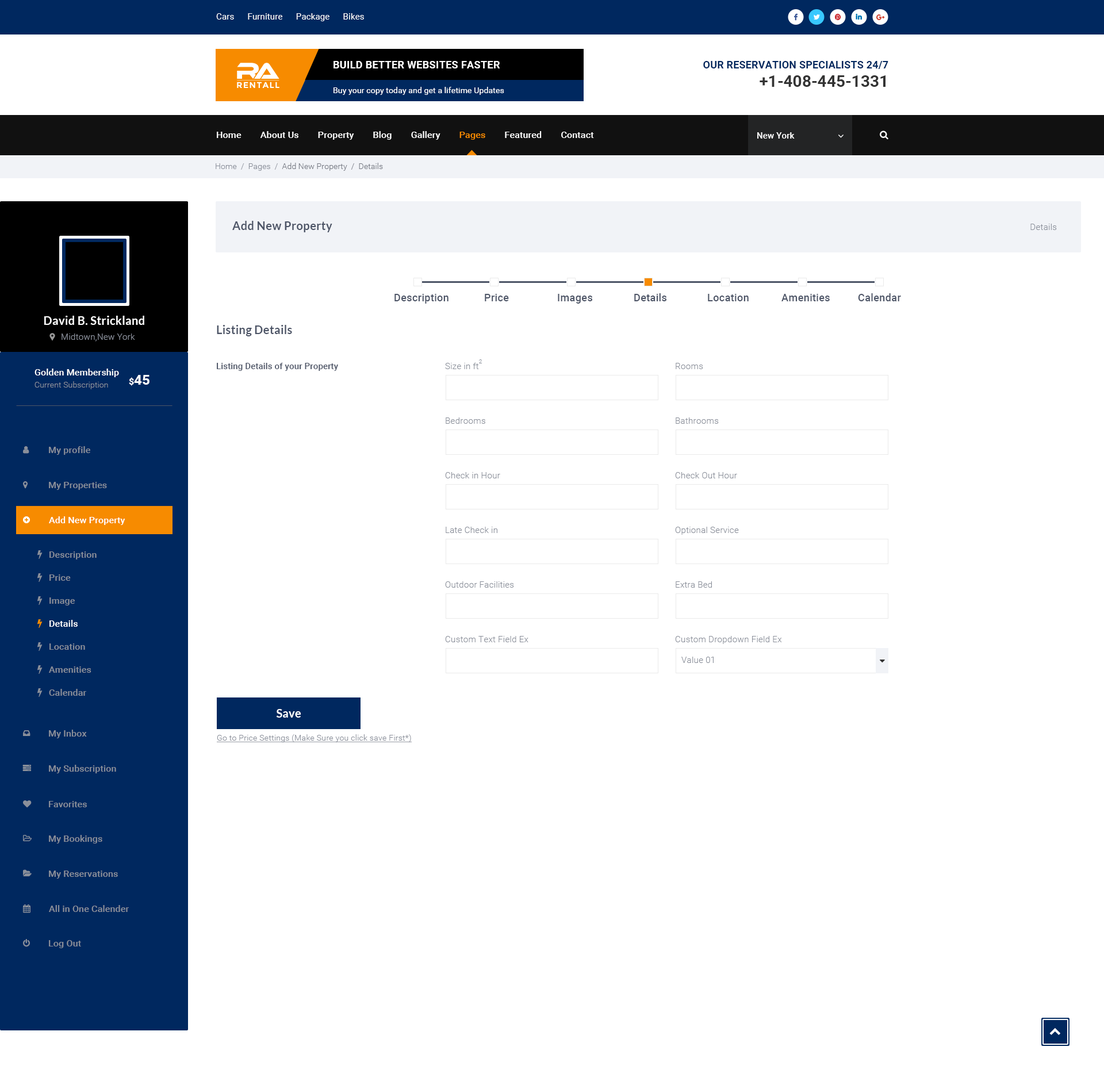
<style>
.page{position:relative;width:1104px;height:1081px;background:#ffffff}
.page>*{position:absolute;margin:0}
.t1{font:8.6px "Roboto-Regular";letter-spacing:0.01em;color:#ffffff}
.t2{font:10.3px "Roboto-Bold";letter-spacing:0.02em;color:#ffffff;text-transform:uppercase}
.t3{font:10.3px "Roboto-Bold";letter-spacing:0.01em;color:#00285f;text-transform:uppercase}
.t4{font:16.1px "Roboto-Bold";color:#333333}
.t5{font:8.4px "Montserrat-Bold";letter-spacing:0.08em;color:#ffffff;text-transform:uppercase}
.t6{font:8px "Roboto-Regular";letter-spacing:0.01em;color:#ffffff}
.t7{font:9.2px "Roboto-Medium";letter-spacing:0.01em;color:#ffffff}
.t8{font:9.2px "Roboto-Medium";letter-spacing:0.01em;color:#f78b00}
.t9{font:8.6px "Roboto-Medium";letter-spacing:0.01em;color:#ffffff}
.t10{font:8px "Roboto-Light";letter-spacing:0.01em;color:#757983}
.t11{font:8px "Roboto-Light";letter-spacing:0.01em;color:#8a8f9a}
.t12{font:11.5px "Lato-Bold";letter-spacing:0.01em;color:#4d5567}
.t13{font:8.6px "Roboto-Light";letter-spacing:0.01em;color:#8a8f9a}
.t14{font:10.3px "Roboto-Medium";letter-spacing:0.01em;color:#4d5567}
.t15{font:11.5px "Lato-Bold";letter-spacing:0.01em;color:#ffffff}
.t16{font:8.6px "Roboto-Medium";letter-spacing:0.01em;color:#4d5567}
.t17{font:5.7px "Roboto-Light";letter-spacing:0.01em;color:#8a8f9a}
.t18{font:13.8px "Roboto-Bold";letter-spacing:0.01em;color:#ffffff}
.t19{font:9.2px "Roboto-Bold";letter-spacing:0.01em;color:#ffffff}
.t20{font:9.2px "Roboto-Medium";letter-spacing:0.01em;color:#8a8f9a}
.t21{font:9.2px/23px "Roboto-Medium";letter-spacing:0.01em;color:#8a8f9a}
.t22{font:9.2px/23px "Roboto-Medium";letter-spacing:0.01em;color:#ffffff}
.t23{font:8px "Roboto-Light";letter-spacing:0.01em;color:#8a8f9a;text-decoration:underline}
</style>
<div class="page">
<p class="t1" style="left:216px;top:13px;width:148px;height:8px">Cars      Furniture      Package      Bikes</p>
<p class="t2" style="left:333px;top:61px;width:167px;height:7px">Build better Websites Faster</p>
<p class="t3" style="left:703px;top:61px;width:185px;height:8px">Our Reservation Specialists 24/7</p>
<p class="t4" style="left:759px;top:75px;width:126px;height:12px">+1-408-445-1331</p>
<p class="t5" style="left:237px;top:82px;width:42px;height:6px">RentAll</p>
<p class="t6" style="left:333px;top:87px;width:171px;height:8px">Buy your copy today and get a lifetime Updates</p>
<p class="t7" style="left:217px;top:131px;width:377px;height:9px">Home        About Us        Property        Blog        Gallery        <span class="t8">Pages</span>        Featured        Contact</p>
<p class="t9" style="left:757px;top:132px;width:37px;height:7px">New York</p>
<p class="t10" style="left:216px;top:163px;width:167px;height:8px"><span class="t11">Home  /  Pages  /  </span>Add New Property  /  Details</p>
<p class="t12" style="left:232px;top:221px;width:100px;height:11px">Add New Property</p>
<p class="t13" style="left:1030px;top:224px;width:26px;height:6px">Details</p>
<p class="t14" style="left:394px;top:294px;width:54px;height:9px">Description</p>
<p class="t14" style="left:485px;top:294px;width:24px;height:7px">Price</p>
<p class="t14" style="left:558px;top:294px;width:34px;height:9px">Images</p>
<p class="t14" style="left:634px;top:293px;width:32px;height:8px">Details</p>
<p class="t14" style="left:708px;top:294px;width:40px;height:7px">Location</p>
<p class="t14" style="left:781px;top:294px;width:48px;height:7px">Amenities</p>
<p class="t14" style="left:858px;top:293px;width:43px;height:8px">Calendar</p>
<p class="t15" style="left:44px;top:316px;width:100px;height:9px">David B. Strickland</p>
<p class="t12" style="left:217px;top:325px;width:75px;height:11px">Listing Details</p>
<p class="t13" style="left:61px;top:333px;width:74px;height:8px">Midtown,New York</p>
<p class="t16" style="left:217px;top:363px;width:121px;height:8px">Listing Details of your Property</p>
<p class="t13" style="left:445px;top:359px;width:37px;height:10px">Size in ft<span class="t17">2</span></p>
<p class="t13" style="left:675px;top:363px;width:28px;height:6px">Rooms</p>
<p class="t7" style="left:34px;top:368px;width:85px;height:9px">Golden Membership</p>
<p class="t18" style="left:129px;top:375px;width:20px;height:11px"><span class="t19">$</span>45</p>
<p class="t11" style="left:34px;top:381px;width:74px;height:8px">Current Subscription</p>
<p class="t13" style="left:445px;top:417px;width:40px;height:7px">Bedrooms</p>
<p class="t13" style="left:675px;top:417px;width:43px;height:7px">Bathrooms</p>
<p class="t20" style="left:49px;top:446px;width:41px;height:9px">My profile</p>
<p class="t13" style="left:445px;top:472px;width:55px;height:6px">Check in Hour</p>
<p class="t13" style="left:675px;top:472px;width:62px;height:6px">Check Out Hour</p>
<p class="t20" style="left:49px;top:482px;width:58px;height:8px">My Properties</p>
<p class="t7" style="left:49px;top:516px;width:76px;height:9px">Add New Property</p>
<p class="t13" style="left:445px;top:526px;width:52px;height:7px">Late Check in</p>
<p class="t13" style="left:675px;top:526px;width:64px;height:9px">Optional Service</p>
<p class="t21" style="left:49px;top:551px;width:48px;height:144px">Description<br>Price<br>Image<br><span class="t22">Details<br></span>Location<br>Amenities<br>Calendar</p>
<p class="t13" style="left:445px;top:581px;width:69px;height:6px">Outdoor Facilities</p>
<p class="t13" style="left:675px;top:581px;width:37px;height:6px">Extra Bed</p>
<p class="t13" style="left:445px;top:636px;width:83px;height:6px">Custom Text Field Ex</p>
<p class="t13" style="left:675px;top:636px;width:107px;height:8px">Custom Dropdown Field Ex</p>
<p class="t13" style="left:681px;top:656px;width:32px;height:7px">Value 01</p>
<p class="t15" style="left:276px;top:709px;width:25px;height:8px">Save</p>
<p class="t20" style="left:49px;top:729px;width:38px;height:9px">My Inbox</p>
<p class="t23" style="left:217px;top:734px;width:195px;height:8px">Go to Price Settings (Make Sure you click save First*)</p>
<p class="t20" style="left:49px;top:764px;width:67px;height:9px">My Subscription</p>
<p class="t20" style="left:49px;top:801px;width:38px;height:6px">Favorites</p>
<p class="t20" style="left:49px;top:835px;width:53px;height:8px">My Bookings</p>
<p class="t20" style="left:49px;top:870px;width:69px;height:8px">My Reservations</p>
<p class="t20" style="left:49px;top:905px;width:80px;height:7px">All in One Calender</p>
<p class="t20" style="left:49px;top:940px;width:32px;height:8px">Log Out</p>
</div>
